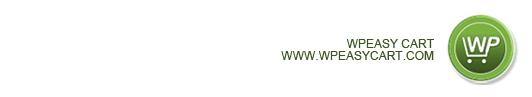
<style>
.page{position:relative;width:532px;height:97px;background:#ffffff}
.page>*{position:absolute;margin:0}
.t1{font:12px/12px "ArialMT";color:#3c551f}
</style>
<div class="page">
<p class="t1" style="left:281px;top:39px;width:153px;height:21px;text-align:right">WPEASY CART<br>WWW.WPEASYCART.COM</p>
</div>
